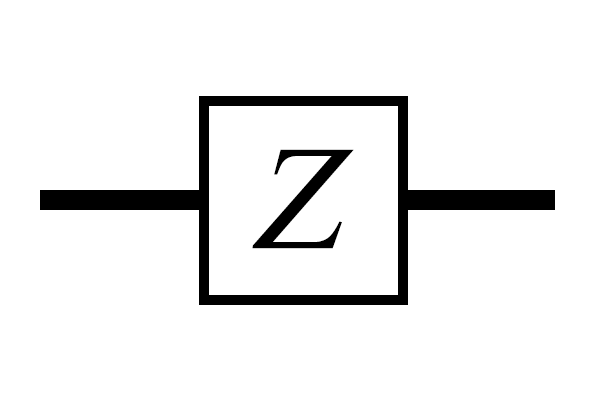
<style>
.page{position:relative;width:600px;height:400px;background:#ffffff}
.page>*{position:absolute;margin:0}
.t1{font:148.5px "TimesNewRomanPSMT";color:#000000;font-style:italic}
</style>
<div class="page">
<p class="t1" style="left:252px;top:149px;width:102px;height:100px">Z</p>
</div>
